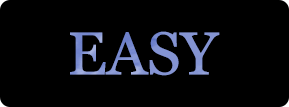
<style>
.page{position:relative;width:289px;height:107px;background:#000000}
.page>*{position:absolute;margin:0}
.t1{font:60px "Georgia";color:#8494d3}
</style>
<div class="page">
<p class="t1" style="left:70px;top:31px;width:150px;height:45px">EASY</p>
</div>
